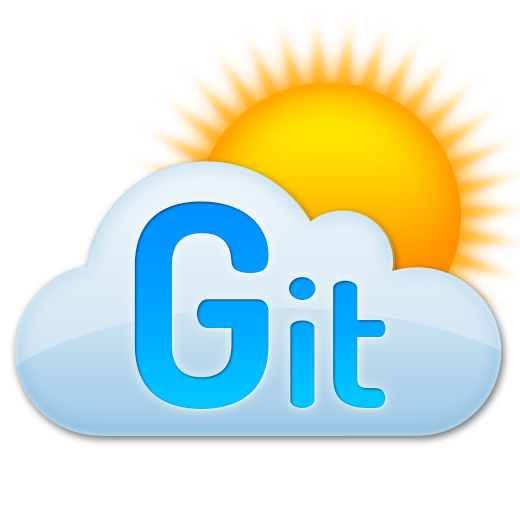
<style>
.page{position:relative;width:520px;height:520px;background:#ffffff}
.page>*{position:absolute;margin:0}
.t1{font:185.8px "Dosis-Bold"}
.t2{font:283.1px "Dosis-Bold"}
</style>
<div class="page">
<p class="t1" style="left:134px;top:201px;width:252px;height:208px"><span class="t2">G</span>it</p>
</div>
